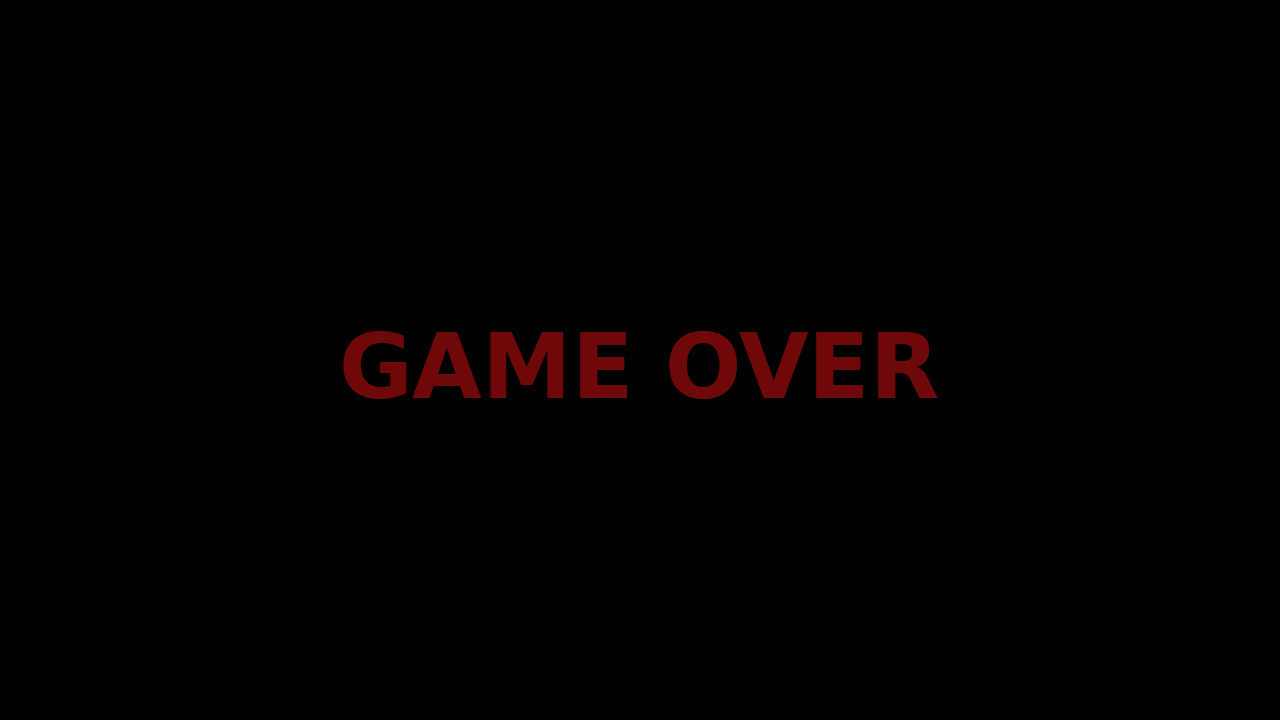
<style>
.page{position:relative;width:1280px;height:720px;background:#000000}
.page>*{position:absolute;margin:0}
.t1{font:90px "DejaVuSans-Bold";color:#6f0909}
</style>
<div class="page">
<p class="t1" style="left:343px;top:331px;width:595px;height:68px">GAME OVER</p>
</div>
